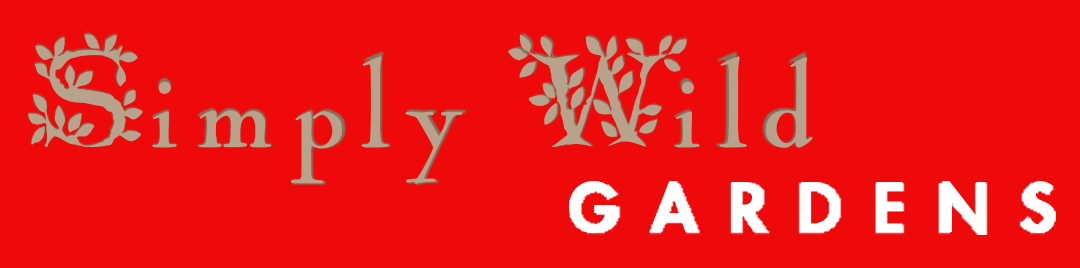
<style>
.page{position:relative;width:1080px;height:268px;background:#ee0a0a}
.page>*{position:absolute;margin:0}
.t1{font:125px "Navinno";letter-spacing:0.1em;color:#b7a38b}
.t2{font:129.4px "Tenderleaf";color:#b7a38b;scale:0.87 1}
.t3{font:66.7px "FuturaStd-Heavy";letter-spacing:0.49em;color:#ffffff}
</style>
<div class="page">
<p class="t1" style="left:28px;top:34px;width:435px;height:150px"><span class="t2">S</span>imply</p>
<p class="t2" style="left:507px;top:34px;width:180px;height:113px">W</p>
<p class="t1" style="left:675px;top:56px;width:138px;height:92px">ild</p>
<p class="t3" style="left:569px;top:181px;width:487px;height:52px">GARDENS</p>
</div>
